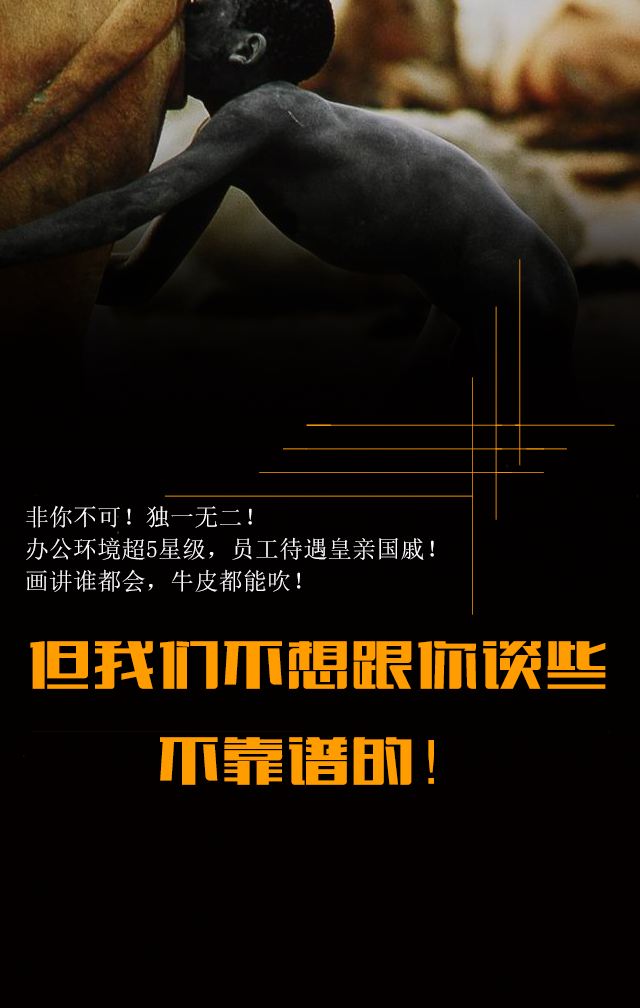
<style>
.page{position:relative;width:640px;height:1008px;background:#030000}
.page>*{position:absolute;margin:0}
.t1{font:24px/32px "SimSun";letter-spacing:0.01em;color:#ffffff}
.t2{font:24px/64px "SimSun";letter-spacing:0.01em;color:#ffffff}
.t3{font:64px/96px "FZCTHJW--GB1-0";letter-spacing:0.01em;color:#ff9c00}
</style>
<div class="page">
<p class="t1" style="left:26px;top:505px;width:580px;height:280px">非你不可！独一无二！<br>办公环境超5星级，员工待遇皇亲国戚！<br><span class="t2">画讲谁都会，牛皮都能吹！<br></span><span class="t3">但我们不想跟你谈些不靠谱的！</span></p>
</div>
